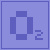
<style>
.page{position:relative;width:50px;height:50px;background:#8b8bdc}
.page>*{position:absolute;margin:0}
.t1{font:48px "Silkscreen";letter-spacing:0.025em;color:#5e5ebf;text-transform:uppercase}
.t2{font:16px "Silkscreen";letter-spacing:0.025em;color:#5e5ebf;text-transform:uppercase}
</style>
<div class="page">
<p class="t1" style="left:10px;top:11px;width:23px;height:29px">O</p>
<p class="t2" style="left:35px;top:30px;width:8px;height:10px">2</p>
</div>
